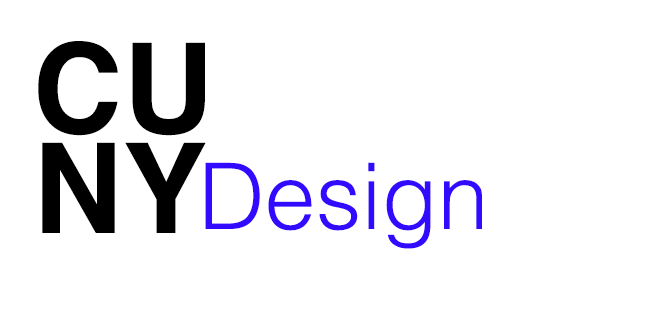
<style>
.page{position:relative;width:661px;height:326px;background:#ffffff}
.page>*{position:absolute;margin:0}
.t1{font:125px/100px "Helvetica-Bold";color:#000000}
.t2{font:91.7px "Helvetica-Light";color:#310aff}
</style>
<div class="page">
<p class="t1" style="left:38px;top:41px;width:168px;height:192px">CU<br>NY</p>
<p class="t2" style="left:205px;top:162px;width:277px;height:87px">Design</p>
</div>
